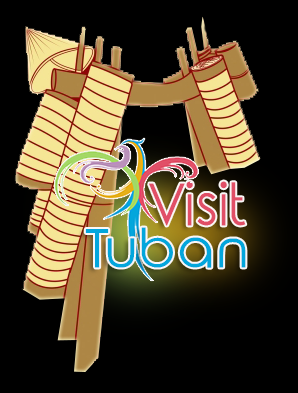
<style>
.page{position:relative;width:298px;height:393px;background:#000000}
.page>*{position:absolute;margin:0}
.t1{font:27.8px "RoundedElegance-Regular";color:#e14f67;scale:0.97 1}
.t2{font:25.6px "RoundedElegance-Regular";color:#03a6dc;scale:1.05 1}
</style>
<div class="page">
<p class="t1" style="left:149px;top:181px;width:97px;height:45px">Visit</p>
<p class="t2" style="left:85px;top:227px;width:161px;height:41px">Tuban</p>
</div>
